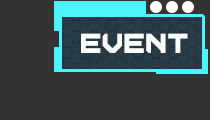
<style>
.page{position:relative;width:210px;height:120px;background:#333333}
.page>*{position:absolute;margin:0}
.t1{font:19.2px "Astrolab";color:#ffffff}
</style>
<div class="page">
<p class="t1" style="left:81px;top:33px;width:107px;height:20px">EVENT</p>
</div>
